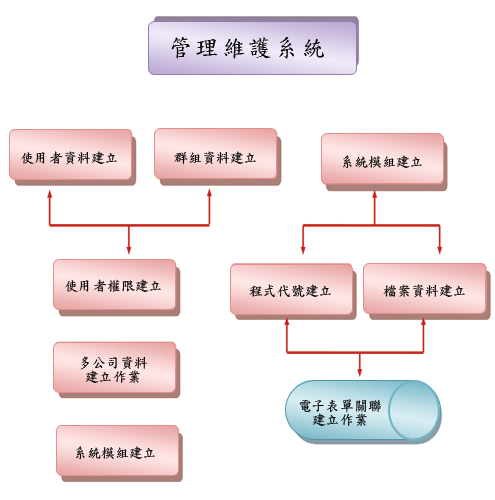
<style>
.page{position:relative;width:495px;height:500px;background:#ffffff}
.page>*{position:absolute;margin:0}
.t1{font:24px "DFKaiShu-SB-Estd-BF";letter-spacing:0.1em;color:#010101}
.t2{font:14px "DFKaiShu-SB-Estd-BF";color:#000000}
.t3{font:14px/14px "DFKaiShu-SB-Estd-BF";color:#000000}
</style>
<div class="page">
<p class="t1" style="left:171px;top:37px;width:153px;height:22px">管理維護系統</p>
<p class="t2" style="left:21px;top:151px;width:96px;height:14px">使用者資料建立</p>
<p class="t2" style="left:174px;top:151px;width:82px;height:14px">群組資料建立</p>
<p class="t2" style="left:343px;top:155px;width:79px;height:13px">系統模組建立</p>
<p class="t2" style="left:65px;top:279px;width:96px;height:14px">使用者權限建立</p>
<p class="t2" style="left:249px;top:284px;width:82px;height:13px">程式代號建立</p>
<p class="t2" style="left:383px;top:284px;width:82px;height:14px">檔案資料建立</p>
<p class="t3" style="left:80px;top:356px;width:68px;height:27px;text-align:center">多公司資料<br>建立作業</p>
<p class="t3" style="left:299px;top:399px;width:82px;height:27px;text-align:center">電子表單關聯<br>建立作業</p>
<p class="t2" style="left:76px;top:446px;width:79px;height:13px">系統模組建立</p>
</div>
